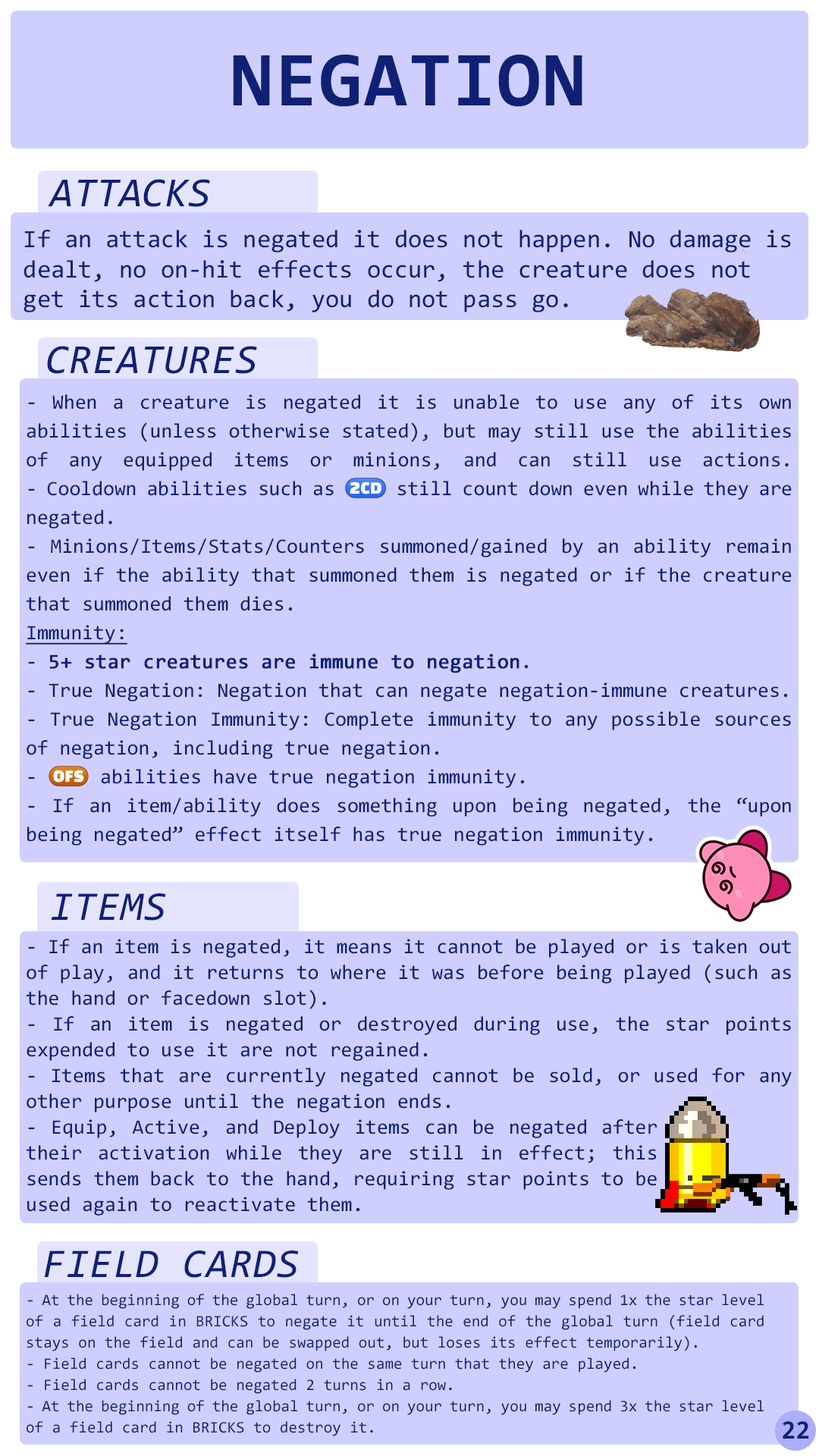
<style>
.page{position:relative;width:819px;height:1456px;background:#cfcfff}
.page>*{position:absolute;margin:0}
.t1{font:78.3px "Consolas-Bold";letter-spacing:0.02em;color:#102175}
.t2{font:41.7px "Consolas-Italic";color:#102175}
.t3{font:25px "Consolas";color:#102175}
.t4{font:41.7px "Consolas-Italic";letter-spacing:0.02em;color:#102175}
.t5{font:20.5px/28.8px "Consolas";color:#102175}
.t6{font:20.5px/28.8px "stoogedings-Regular";color:#102175}
.t7{font:20.5px/28.8px "Consolas";color:#102175;text-decoration:underline}
.t8{font:20.5px/28.8px "Consolas";color:#102175;font-weight:bold}
.t9{font:41.1px "Consolas-Italic";letter-spacing:0.02em;color:#102175}
.t10{font:20.5px/25.8px "Consolas";color:#102175}
.t11{font:15.9px/21.2px "Consolas";color:#102175}
.t12{font:26.4px "Consolas-Bold";color:#102175}
</style>
<div class="page">
<p class="t1" style="left:233px;top:55px;width:349px;height:52px">NEGATION</p>
<p class="t2" style="left:48px;top:179px;width:162px;height:28px">ATTACKS</p>
<p class="t3" style="left:24px;top:230px;width:767px;height:82px">If an attack is negated it does not happen. No damage is dealt, no on-hit effects occur, the creature does not get its action back, you do not pass go.</p>
<p class="t4" style="left:47px;top:346px;width:210px;height:28px">CREATURES</p>
<p class="t5" style="left:26px;top:394px;width:766px;height:452px;text-align:justify">- When a creature is negated it is unable to use any of its own abilities (unless otherwise stated), but may still use the abilities of any equipped items or minions, and can still use actions.<br>- Cooldown abilities such as <span class="t6">(2CD)</span> still count down even while they are negated.<br>- Minions/Items/Stats/Counters summoned/gained by an ability remain even if the ability that summoned them is negated or if the creature that summoned them dies. <br><span class="t7">Immunity:<br></span>- <span class="t8">5+ star creatures are immune to negation</span>.<br>- True Negation: Negation that can negate negation-immune creatures.<br>- True Negation Immunity: Complete immunity to any possible sources of negation, including true negation.<br>- <span class="t6">(OFS)</span> abilities have true negation immunity.<br>- If an item/ability does something upon being negated, the “upon being negated” effect itself has true negation immunity.</p>
<p class="t9" style="left:51px;top:893px;width:115px;height:28px">ITEMS</p>
<p class="t10" style="left:26px;top:939px;width:766px;height:277px;text-align:justify">- If an item is negated, it means it cannot be played or is taken out of play, and it returns to where it was before being played (such as the hand or facedown slot).<br>- If an item is negated or destroyed during use, the star points expended to use it are not regained.<br>- Items that are currently negated cannot be sold, or used for any other purpose until the negation ends.<br>- Equip, Active, and Deploy items can be negated after their activation while they are still in effect; this sends them back to the hand, requiring star points to be used again to reactivate them.</p>
<p class="t9" style="left:44px;top:1250px;width:255px;height:28px">FIELD CARDS</p>
<p class="t11" style="left:27px;top:1294px;width:737px;height:142px;text-align:justify">- At the beginning of the global turn, or on your turn, you may spend 1x the star level of a field card in BRICKS to negate it until the end of the global turn (field card stays on the field and can be swapped out, but loses its effect temporarily).<br>- Field cards cannot be negated on the same turn that they are played.<br>- Field cards cannot be negated 2 turns in a row.<br>- At the beginning of the global turn, or on your turn, you may spend 3x the star level of a field card in BRICKS to destroy it.</p>
<p class="t12" style="left:783px;top:1421px;width:26px;height:18px">22</p>
</div>
